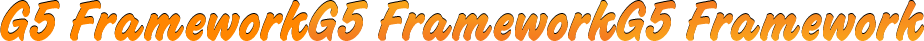
<style>
.page{position:relative;width:924px;height:41px;background:#ffffff}
.page>*{position:absolute;margin:0}
.t1{font:60px "ChallengeBoldPlain";color:#ff8600}
.t2{font:60px "ChallengeBoldPlain";color:#f68a1e}
.t3{font:60px "ChallengeBoldPlain";color:#faa51a}
</style>
<div class="page">
<p class="t1" style="left:0px;top:1px;width:308px;height:40px">G5 Framework</p>
<p class="t2" style="left:308px;top:1px;width:308px;height:40px">G5 Framework</p>
<p class="t3" style="left:616px;top:1px;width:308px;height:40px">G5 Framework</p>
</div>
